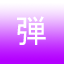
<style>
.page{position:relative;width:64px;height:64px}
.page>*{position:absolute;margin:0}
.t1{font:32px "MS-Gothic";color:#ffffff}
</style>
<div class="page">
<p class="t1" style="left:17px;top:16px;width:29px;height:29px">弾</p>
</div>
